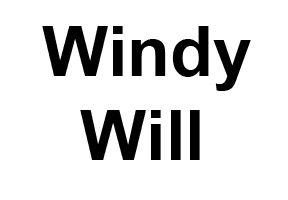
<style>
.page{position:relative;width:288px;height:200px;background:#ffffff}
.page>*{position:absolute;margin:0}
.t1{font:70px "Arial-BoldMT";color:#000000}
</style>
<div class="page">
<p class="t1" style="left:42px;top:26px;width:209px;height:134px">Windy                            Will <br>Will</p>
</div>
